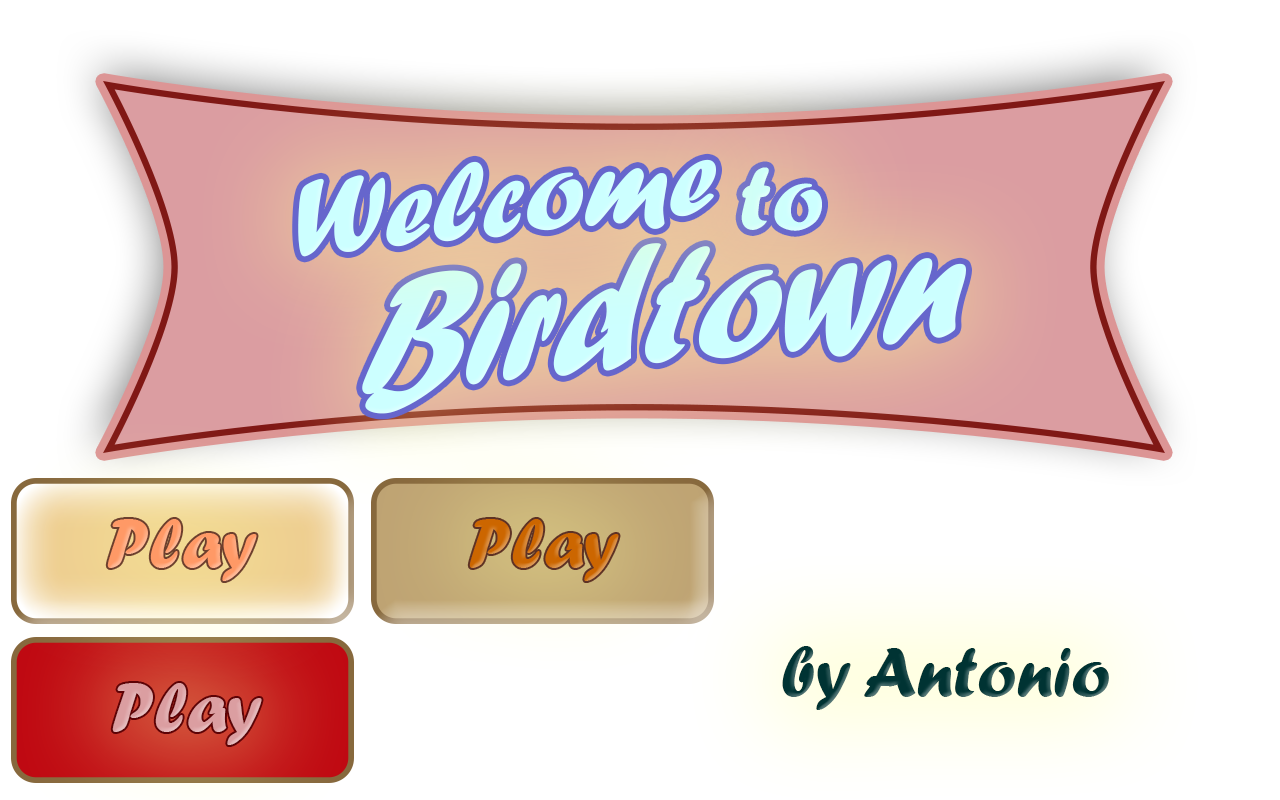
<style>
.page{position:relative;width:1280px;height:800px;background:#ffffff}
.page>*{position:absolute;margin:0}
.t1{font:114.3px "ForteMT";color:#ccffff}
.t2{font:95.8px "ForteMT";color:#ccffff}
.t3{font:180.3px "ForteMT";color:#ccffff;scale:0.86 1}
.t4{font:72px "ForteMT";color:#ff9966}
.t5{font:72px "ForteMT";color:#cc6600}
.t6{font:72px "ForteMT";color:#003333}
.t7{font:72px "ForteMT";color:#db9ea1}
</style>
<div class="page">
<p class="t1" style="left:298px;top:159px;width:418px;height:98px;rotate:-6deg">Welcome</p>
<p class="t2" style="left:741px;top:167px;width:81px;height:64px;rotate:-1deg">to</p>
<p class="t3" style="left:362px;top:243px;width:604px;height:171px;rotate:-6deg">Birdtown</p>
<p class="t4" style="left:107px;top:519px;width:150px;height:62px">Play</p>
<p class="t5" style="left:469px;top:519px;width:150px;height:62px">Play</p>
<p class="t6" style="left:782px;top:646px;width:327px;height:64px">by Antonio</p>
<p class="t7" style="left:112px;top:683px;width:150px;height:62px">Play</p>
</div>
